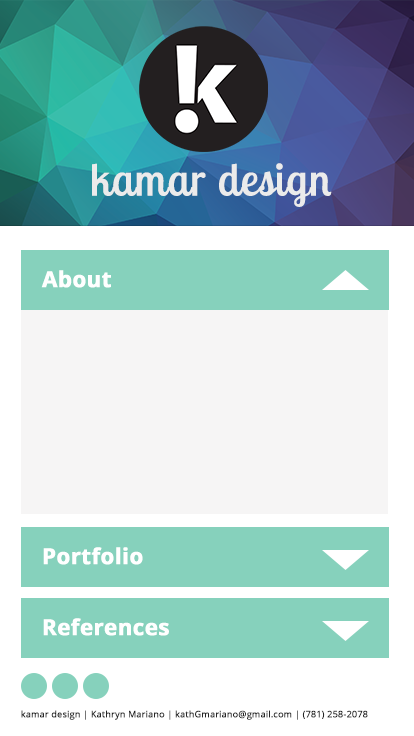
<style>
.page{position:relative;width:414px;height:736px;background:#f6f5f5}
.page>*{position:absolute;margin:0}
.t1{font:45px "LobsterTwo";color:#ebebeb;font-weight:bold}
.t2{font:22px "OpenSans-Bold";color:#ffffff;font-weight:bold}
.t3{font:9px "OpenSans";color:#252525;font-weight:bold}
</style>
<div class="page">
<p class="t1" style="left:92px;top:163px;width:240px;height:44px">kamar design</p>
<p class="t2" style="left:41px;top:270px;width:70px;height:18px">About</p>
<p class="t2" style="left:43px;top:547px;width:100px;height:18px">Portfolio</p>
<p class="t2" style="left:43px;top:618px;width:126px;height:18px">References</p>
<p class="t3" style="left:21px;top:710px;width:347px;height:10px">kamar design | Kathryn Mariano | kathGmariano@gmail.com | (781) 258-2078</p>
</div>
